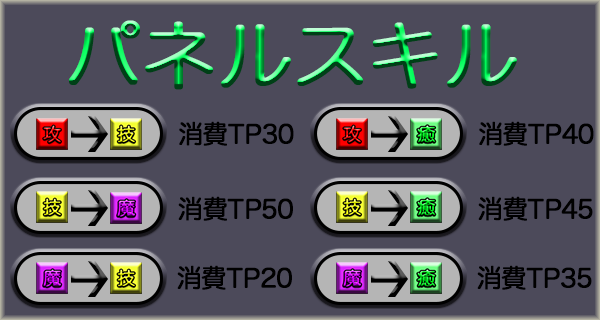
<style>
.page{position:relative;width:600px;height:320px;background:#4c4a5a}
.page>*{position:absolute;margin:0}
.t1{font:76px "HiraMaruPro-W4";letter-spacing:-0.036em;font-weight:bold}
.t2{font:25px "HiraMaruPro-W4";letter-spacing:-0.036em;color:#000000;font-weight:bold}
</style>
<div class="page">
<p class="t1" style="left:69px;top:20px;width:448px;height:70px">パネルスキル</p>
<p class="t2" style="left:179px;top:121px;width:115px;height:25px">消費TP30</p>
<p class="t2" style="left:479px;top:121px;width:115px;height:25px">消費TP40</p>
<p class="t2" style="left:178px;top:196px;width:115px;height:25px">消費TP50</p>
<p class="t2" style="left:478px;top:196px;width:115px;height:25px">消費TP45</p>
<p class="t2" style="left:177px;top:265px;width:115px;height:25px">消費TP20</p>
<p class="t2" style="left:477px;top:265px;width:115px;height:25px">消費TP35</p>
</div>
